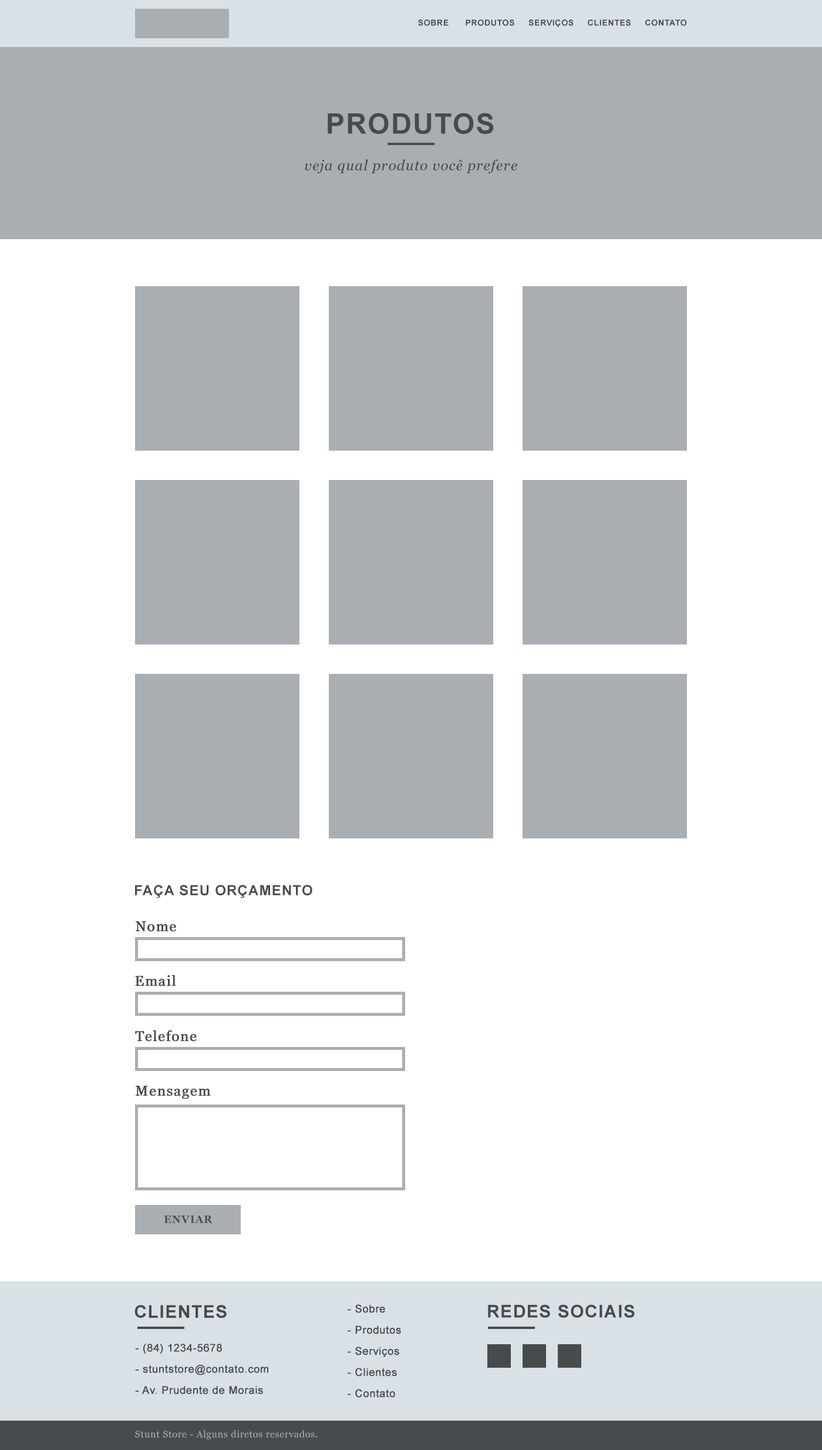
<style>
.page{position:relative;width:822px;height:1450px;background:#ffffff}
.page>*{position:absolute;margin:0}
.t1{font:8.2px "Arial-BoldMT";letter-spacing:0.05em;color:#484b4d;text-transform:uppercase}
.t2{font:28.2px "Arial-BoldMT";letter-spacing:0.05em;color:#484b4d;text-transform:uppercase}
.t3{font:14.1px "Georgia-Italic";letter-spacing:0.05em;color:#484b4d}
.t4{font:14.1px "Arial-BoldMT";letter-spacing:0.05em;color:#484b4d;text-transform:uppercase}
.t5{font:14.1px "Georgia";letter-spacing:0.05em;color:#484b4d;font-weight:bold}
.t6{font:10.6px "Georgia-Bold";letter-spacing:0.05em;color:#484b4d;text-transform:uppercase}
.t7{font:17.6px "Arial-BoldMT";letter-spacing:0.05em;color:#484b4d;text-transform:uppercase}
.t8{font:10.6px/21.1px "ArialMT";letter-spacing:0.025em;color:#484b4d;font-weight:bold}
.t9{font:9.4px "Georgia";letter-spacing:0.05em;color:#a9aeb3}
</style>
<div class="page">
<p class="t1" style="left:418px;top:19px;width:269px;height:8px">Sobre      produtos     serviços     Clientes     contato</p>
<p class="t2" style="left:328px;top:113px;width:166px;height:21px">produtos</p>
<p class="t3" style="left:304px;top:159px;width:214px;height:14px">veja qual produto você prefere</p>
<p class="t4" style="left:135px;top:885px;width:178px;height:13px">Faça seu orçamento</p>
<p class="t5" style="left:135px;top:921px;width:41px;height:11px">Nome</p>
<p class="t5" style="left:135px;top:975px;width:41px;height:11px">Email</p>
<p class="t5" style="left:135px;top:1030px;width:62px;height:12px">Telefone</p>
<p class="t5" style="left:135px;top:1086px;width:76px;height:13px">Mensagem</p>
<p class="t6" style="left:164px;top:1215px;width:49px;height:8px">Enviar</p>
<p class="t7" style="left:135px;top:1305px;width:92px;height:13px">Clientes</p>
<p class="t8" style="left:348px;top:1304px;width:53px;height:94px">- Sobre<br>- Produtos<br>- Serviços<br>- Clientes<br>- Contato</p>
<p class="t7" style="left:488px;top:1304px;width:147px;height:14px">Redes Sociais</p>
<p class="t8" style="left:135px;top:1344px;width:133px;height:50px">- (84) 1234-5678<br>- stuntstore@contato.com<br>- Av. Prudente de Morais</p>
<p class="t9" style="left:135px;top:1430px;width:183px;height:9px">Stunt Store - Alguns diretos reservados.</p>
</div>
